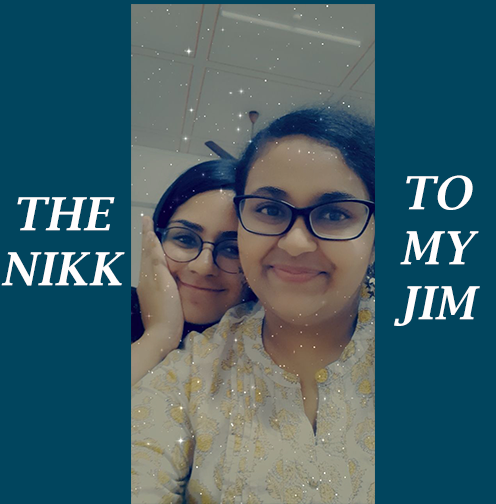
<style>
.page{position:relative;width:496px;height:504px;background:#01455e}
.page>*{position:absolute;margin:0}
.t1{font:45.8px "LucidaBright-DemiItalic";color:#fffefe;text-transform:uppercase}
</style>
<div class="page">
<p class="t1" style="left:394px;top:175px;width:86px;height:151px;text-align:center">to <br>my<br>jim</p>
<p class="t1" style="left:1px;top:197px;width:124px;height:89px;text-align:center">the<br>nikk</p>
</div>
